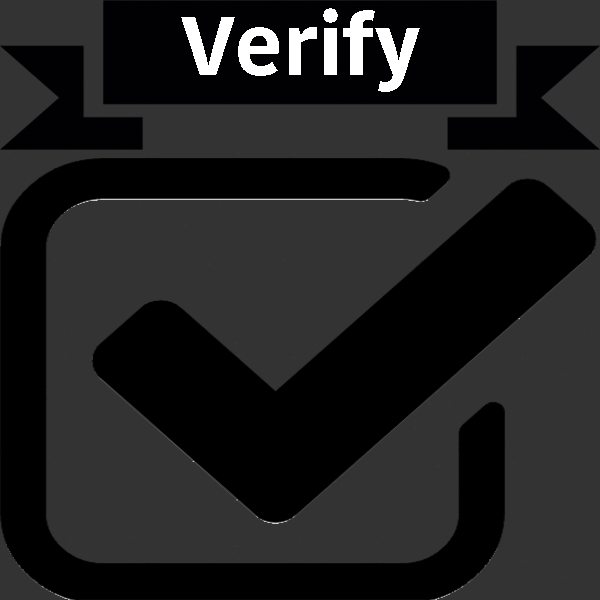
<style>
.page{position:relative;width:600px;height:600px;background:#333333}
.page>*{position:absolute;margin:0}
.t1{font:83.3px "KohinoorDevanagari-Bold";color:#ffffff}
</style>
<div class="page">
<p class="t1" style="left:181px;top:8px;width:239px;height:84px">Verify</p>
</div>
